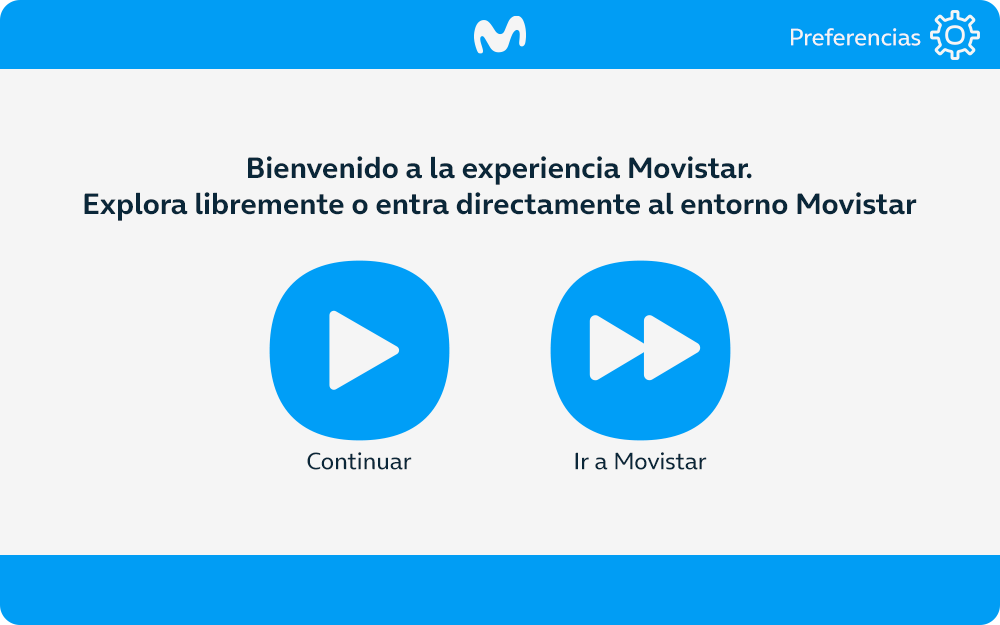
<style>
.page{position:relative;width:1000px;height:625px;background:#f5f5f5}
.page>*{position:absolute;margin:0}
.t1{font:24px "OnAir-Regular";color:#f5f5f5}
.t2{font:30px "OnAir-Bold";color:#0a2739}
.t3{font:24px "OnAir-Regular";color:#0a2739}
</style>
<div class="page">
<p class="t1" style="left:791px;top:28px;width:130px;height:18px">Preferencias</p>
<p class="t2" style="left:84px;top:156px;width:833px;height:65px;text-align:center">Bienvenido a la experiencia Movistar.<br>Explora libremente o entra directamente al entorno Movistar</p>
<p class="t3" style="left:307px;top:452px;width:105px;height:18px">Continuar</p>
<p class="t3" style="left:575px;top:452px;width:132px;height:18px">Ir a Movistar</p>
</div>
